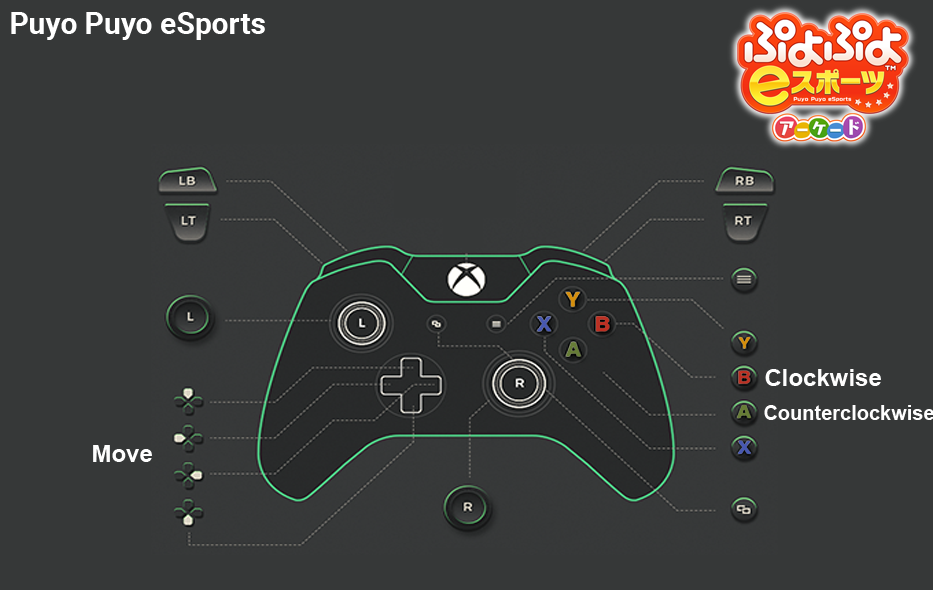
<style>
.page{position:relative;width:933px;height:590px;background:#363838}
.page>*{position:absolute;margin:0}
.t1{font:30px "Roboto-Bold";color:#ffffff}
.t2{font:24px "Arial-BoldMT";color:#fefefe}
.t3{font:20px "Arial-BoldMT";color:#fefefe}
</style>
<div class="page">
<p class="t1" style="left:11px;top:12px;width:254px;height:28px">Puyo Puyo eSports</p>
<p class="t2" style="left:765px;top:369px;width:116px;height:17px">Clockwise</p>
<p class="t3" style="left:764px;top:405px;width:170px;height:15px">Counterclockwise</p>
<p class="t2" style="left:93px;top:445px;width:59px;height:17px">Move</p>
</div>
